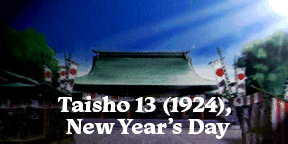
<style>
.page{position:relative;width:288px;height:144px}
.page>*{position:absolute;margin:0}
.t1{font:22px "Monarcha-Bold";color:#ffffff}
.t2{font:22px/22px "Monarcha-Bold";color:#ffffff}
</style>
<div class="page">
<p class="t1" style="left:58px;top:95px;width:173px;height:44px;text-align:center">Taisho 13 (1924), <br><span class="t2">New Year’s Day</span></p>
</div>
